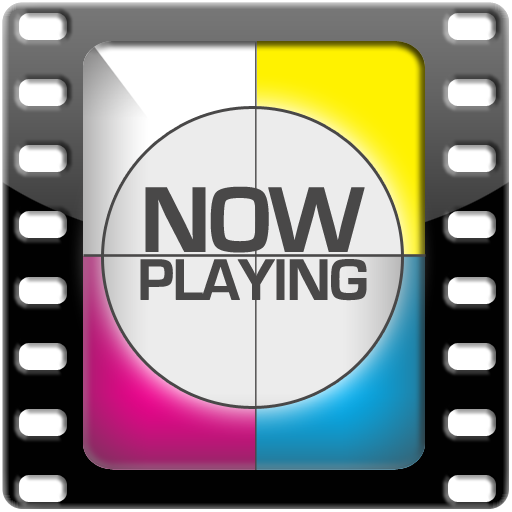
<style>
.page{position:relative;width:512px;height:512px}
.page>*{position:absolute;margin:0}
.t1{font:60px/48px "EurostileBold";letter-spacing:-0.05em;color:#494848;font-weight:bold}
.t2{font:96px/48px "EurostileBold";letter-spacing:-0.05em;color:#494848;font-weight:bold}
</style>
<div class="page">
<p class="t1" style="left:140px;top:186px;width:227px;height:115px;text-align:center"><span class="t2">NOW<br></span>PLAYING</p>
</div>
